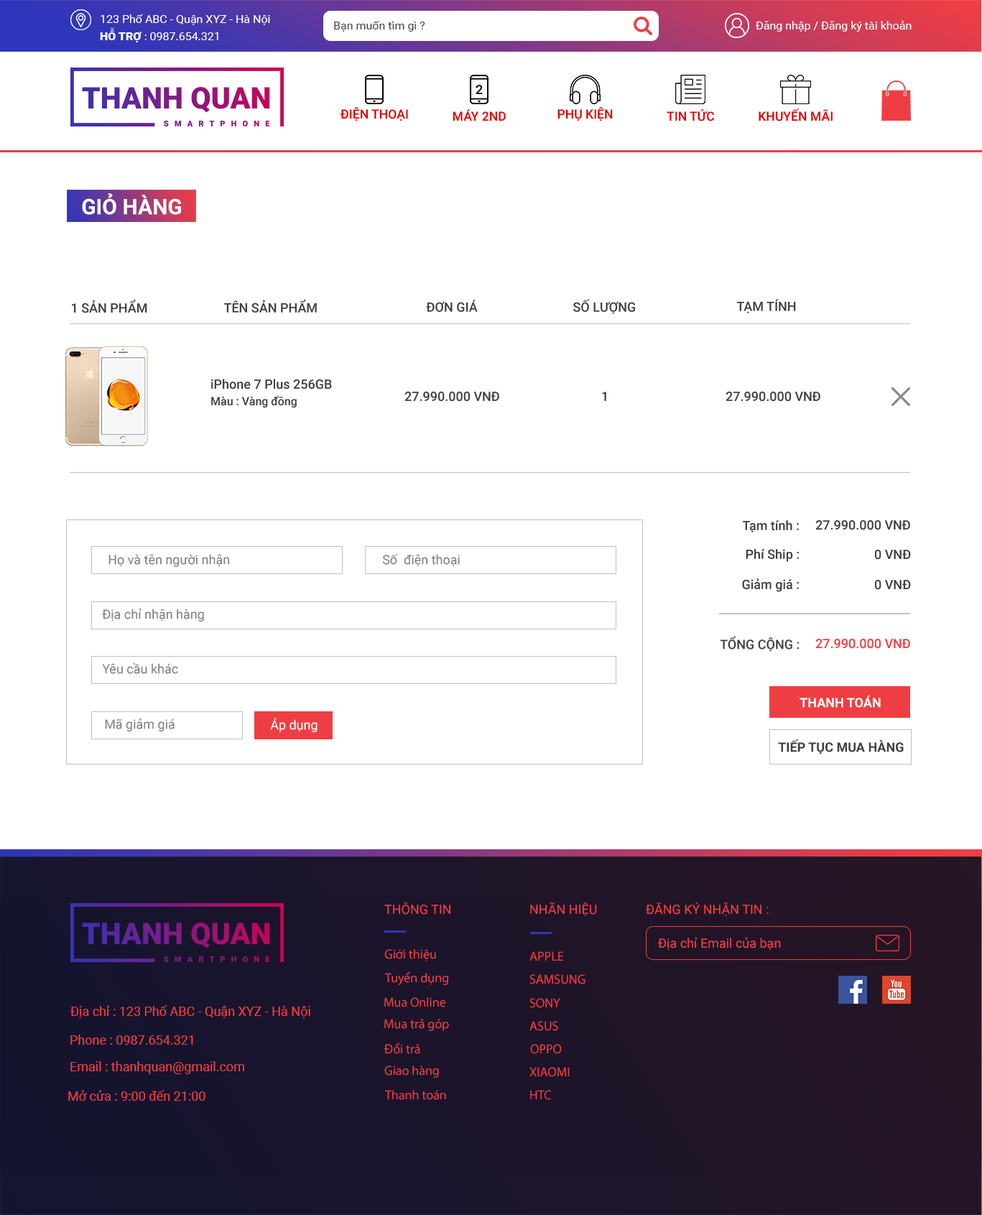
<style>
.page{position:relative;width:982px;height:1215px;background:#ffffff}
.page>*{position:absolute;margin:0}
.t1{font:11.5px "Roboto-Regular";color:#ffffff}
.t2{font:11.5px "Roboto-Black";color:#ffffff}
.t3{font:11.5px "Roboto-Regular";color:#404040}
.t4{font:12.7px "Roboto-Medium";color:#e20000}
.t5{font:21.5px "Roboto-Bold";color:#ffffff}
.t6{font:12.9px "Roboto-Medium";color:#404040}
.t7{font:11.5px "Roboto-Medium";color:#404040}
.t8{font:12.9px "Roboto-Regular";color:#808080}
.t9{font:12.9px "Roboto-Medium";color:#ef3e43}
.t10{font:12.9px "Roboto-Bold";color:#ffffff}
.t11{font:12.9px "Roboto-Regular";color:#ffffff}
.t12{font:12.9px "Roboto-Bold";color:#404040}
.t13{font:12.9px "Roboto-Regular";color:#ef3e43}
.t14{font:12.9px "MyriadPro-Regular";color:#ef3e43}
</style>
<div class="page">
<p class="t1" style="left:101px;top:14px;width:169px;height:11px">123 Phố ABC - Quận XYZ - Hà Nội</p>
<p class="t1" style="left:100px;top:28px;width:118px;height:14px"><span class="t2">HỖ TRỢ </span>: 0987.654.321</p>
<p class="t3" style="left:334px;top:21px;width:91px;height:11px">Bạn muốn tìm gì ?</p>
<p class="t1" style="left:756px;top:21px;width:155px;height:11px">Đăng nhập / Đăng ký tài khoản</p>
<p class="t4" style="left:340px;top:107px;width:68px;height:14px">ĐIỆN THOẠI</p>
<p class="t4" style="left:452px;top:109px;width:54px;height:12px">MÁY 2ND</p>
<p class="t4" style="left:557px;top:107px;width:56px;height:14px">PHỤ KIỆN</p>
<p class="t4" style="left:667px;top:109px;width:47px;height:12px">TIN TỨC</p>
<p class="t4" style="left:758px;top:108px;width:74px;height:13px">KHUYẾN MÃI</p>
<p class="t5" style="left:82px;top:193px;width:99px;height:22px">GIỎ HÀNG</p>
<p class="t6" style="left:72px;top:299px;width:75px;height:14px">1 SẢN PHẨM</p>
<p class="t6" style="left:224px;top:299px;width:93px;height:13px">TÊN SẢN PHẨM</p>
<p class="t6" style="left:426px;top:300px;width:52px;height:12px">ĐƠN GIÁ</p>
<p class="t6" style="left:573px;top:299px;width:62px;height:15px">SỐ LƯỢNG</p>
<p class="t6" style="left:737px;top:299px;width:59px;height:14px">TẠM TÍNH</p>
<p class="t6" style="left:211px;top:379px;width:121px;height:10px">iPhone 7 Plus 256GB</p>
<p class="t7" style="left:211px;top:395px;width:86px;height:13px">Màu : Vàng đồng</p>
<p class="t6" style="left:404px;top:391px;width:95px;height:10px">27.990.000 VNĐ</p>
<p class="t6" style="left:602px;top:391px;width:4px;height:10px">1</p>
<p class="t6" style="left:725px;top:391px;width:95px;height:10px">27.990.000 VNĐ</p>
<p class="t6" style="left:743px;top:520px;width:56px;height:12px">Tạm tính :</p>
<p class="t6" style="left:815px;top:520px;width:95px;height:10px">27.990.000 VNĐ</p>
<p class="t8" style="left:108px;top:554px;width:121px;height:13px">Họ và tên người nhận</p>
<p class="t8" style="left:383px;top:554px;width:77px;height:13px">Số  điện thoại</p>
<p class="t6" style="left:746px;top:549px;width:53px;height:13px">Phí Ship :</p>
<p class="t6" style="left:875px;top:549px;width:36px;height:10px">0 VNĐ</p>
<p class="t6" style="left:742px;top:578px;width:57px;height:14px">Giảm giá :</p>
<p class="t6" style="left:875px;top:580px;width:36px;height:10px">0 VNĐ</p>
<p class="t8" style="left:102px;top:608px;width:102px;height:13px">Địa chỉ nhận hàng</p>
<p class="t6" style="left:720px;top:636px;width:79px;height:15px">TỔNG CỘNG :</p>
<p class="t9" style="left:815px;top:639px;width:95px;height:10px">27.990.000 VNĐ</p>
<p class="t8" style="left:102px;top:663px;width:76px;height:11px">Yêu cầu khác</p>
<p class="t10" style="left:799px;top:695px;width:82px;height:12px">THANH TOÁN</p>
<p class="t8" style="left:105px;top:718px;width:70px;height:13px">Mã giảm giá</p>
<p class="t11" style="left:270px;top:718px;width:47px;height:14px">Áp dụng</p>
<p class="t12" style="left:778px;top:739px;width:126px;height:15px">TIẾP TỤC MUA HÀNG</p>
<p class="t13" style="left:384px;top:901px;width:66px;height:13px">THÔNG TIN</p>
<p class="t13" style="left:530px;top:901px;width:67px;height:15px">NHÃN HIỆU</p>
<p class="t13" style="left:646px;top:901px;width:123px;height:15px">ĐĂNG KÝ NHẬN TIN :</p>
<p class="t13" style="left:658px;top:937px;width:123px;height:12px">Địa chỉ Email của bạn</p>
<p class="t14" style="left:384px;top:949px;width:52px;height:12px">Giới thiệu</p>
<p class="t14" style="left:529px;top:951px;width:34px;height:9px">APPLE</p>
<p class="t14" style="left:385px;top:971px;width:63px;height:14px">Tuyển dụng</p>
<p class="t14" style="left:529px;top:974px;width:56px;height:10px">SAMSUNG</p>
<p class="t14" style="left:384px;top:997px;width:61px;height:10px">Mua Online</p>
<p class="t14" style="left:529px;top:998px;width:31px;height:10px">SONY</p>
<p class="t13" style="left:70px;top:1005px;width:240px;height:13px">Địa chỉ : 123 Phố ABC - Quận XYZ - Hà Nội</p>
<p class="t14" style="left:384px;top:1018px;width:65px;height:13px">Mua trả góp</p>
<p class="t14" style="left:529px;top:1021px;width:29px;height:10px">ASUS</p>
<p class="t13" style="left:70px;top:1034px;width:123px;height:10px">Phone : 0987.654.321</p>
<p class="t14" style="left:384px;top:1042px;width:36px;height:12px">Đổi trả</p>
<p class="t14" style="left:530px;top:1044px;width:32px;height:10px">OPPO</p>
<p class="t13" style="left:70px;top:1061px;width:174px;height:13px">Email : thanhquan@gmail.com</p>
<p class="t14" style="left:384px;top:1065px;width:55px;height:12px">Giao hàng</p>
<p class="t14" style="left:529px;top:1067px;width:41px;height:10px">XIAOMI</p>
<p class="t13" style="left:68px;top:1090px;width:137px;height:10px">Mở cửa : 9:00 đến 21:00</p>
<p class="t14" style="left:385px;top:1090px;width:61px;height:10px">Thanh toán</p>
<p class="t14" style="left:530px;top:1090px;width:21px;height:10px">HTC</p>
</div>
